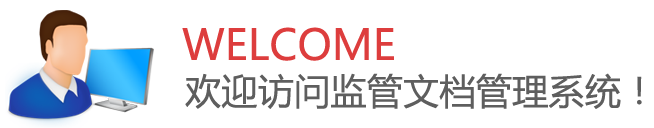
<style>
.page{position:relative;width:654px;height:128px;background:#ffffff}
.page>*{position:absolute;margin:0}
.t1{font:42px "MicrosoftYaHei";color:#dd3d3d}
.t2{font:36px "MicrosoftYaHei";letter-spacing:0.01em;color:#5e5e5e}
</style>
<div class="page">
<p class="t1" style="left:182px;top:27px;width:212px;height:34px">WELCOME</p>
<p class="t2" style="left:185px;top:73px;width:457px;height:36px">欢迎访问监管文档管理系统！</p>
</div>
